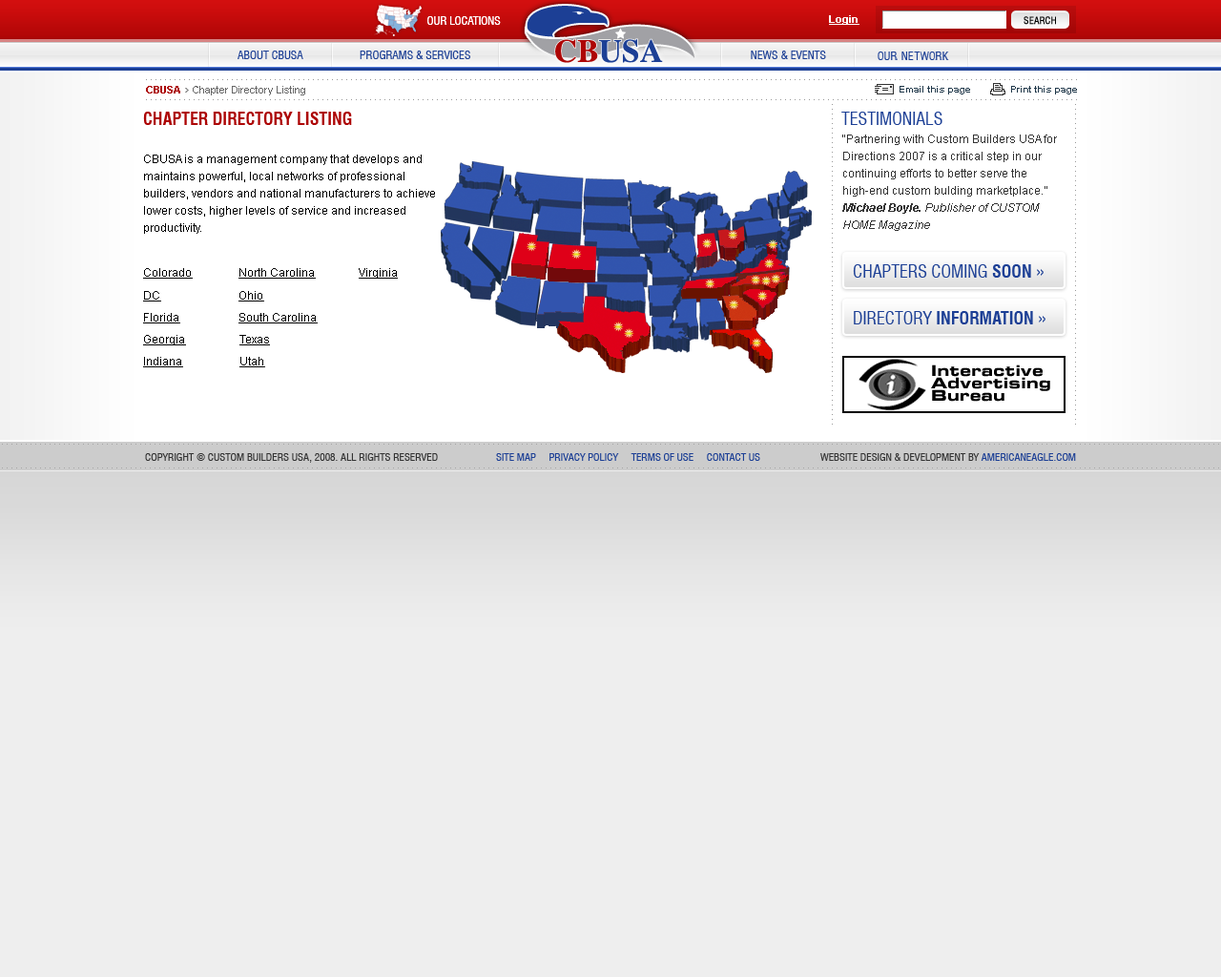
<style>
.page{position:relative;width:1221px;height:977px;background:#eeeeee}
.page>*{position:absolute;margin:0}
.t1{font:11.4px "Swiss721BT-RomanCondensed";letter-spacing:-0.002em;color:#ffffff;text-transform:uppercase}
.t2{font:10.5px "Arial-BoldMT";color:#fffffe;text-decoration:underline}
.t3{font:9.5px "Swiss721BT-RomanCondensed";color:#000000;text-transform:uppercase;font-weight:bold}
.t4{font:10.5px "ArialMT";color:#666666}
.t5{font:10.5px "Arial-BoldMT";color:#ad0505}
.t6{font:9.5px "Arial-BoldMT";color:#1f3749}
.t7{font:17.2px "Swiss721BT-BoldCondensed";color:#ad0505;text-transform:uppercase}
.t8{font:17.2px "Swiss721BT-RomanCondensed";color:#1c3f95;text-transform:uppercase}
.t9{font:11.4px/17.2px "ArialMT";color:#333333}
.t10{font:11.4px/17.2px "Arial-BoldItalicMT";color:#333333}
.t11{font:11.4px/17.2px "Arial-ItalicMT";color:#333333}
.t12{font:10.5px/17.2px "ArialMT";color:#ad0505;text-decoration:underline}
.t13{font:11.4px/17.2px "ArialMT";color:#000000}
.t14{font:11.4px "ArialMT";color:#000000;text-decoration:underline}
.t15{font:17.2px "Swiss721BT-BoldCondensed";color:#1c3f95;text-transform:uppercase}
.t16{font:10.5px "Swiss721BT-RomanCondensed";color:#333333;text-transform:uppercase}
.t17{font:10.5px "Swiss721BT-RomanCondensed";color:#1c3f95;text-transform:uppercase}
</style>
<div class="page">
<p class="t1" style="left:427px;top:16px;width:74px;height:9px;opacity:0.75">Our Locations</p>
<p class="t1" style="left:427px;top:16px;width:74px;height:9px">Our Locations</p>
<p class="t2" style="left:829px;top:15px;width:30px;height:10px">Login</p>
<p class="t3" style="left:1023px;top:16px;width:33px;height:9px">Search</p>
<p class="t4" style="left:146px;top:86px;width:159px;height:9px"><span class="t5">CBUSA</span>    Chapter Directory Listing</p>
<p class="t6" style="left:899px;top:86px;width:71px;height:8px">Email this page</p>
<p class="t6" style="left:1011px;top:86px;width:66px;height:8px">Print this page</p>
<p class="t7" style="left:143px;top:112px;width:209px;height:13px">chapter directory listing</p>
<p class="t8" style="left:841px;top:112px;width:101px;height:13px">Testimonials</p>
<p class="t9" style="left:842px;top:134px;width:215px;height:97px">“Partnering with Custom Builders USA for Directions 2007 is a critical step in our continuing efforts to better serve the high-end custom bulding marketplace.”<br><span class="t10">Michael Boyle.</span><span class="t11"> Publisher of CUSTOM HOME Magazine<br></span><span class="t12">More Testimonials</span></p>
<p class="t13" style="left:144px;top:155px;width:291px;height:79px">CBUSA is a management company that develops and maintains powerful, local networks of professional builders, vendors and national manufacturers to achieve lower costs, higher levels of service and increased productivity.</p>
<p class="t14" style="left:143px;top:268px;width:50px;height:11px">Colorado</p>
<p class="t14" style="left:238px;top:268px;width:78px;height:11px">North Carolina</p>
<p class="t14" style="left:359px;top:268px;width:39px;height:11px">Virginia</p>
<p class="t8" style="left:853px;top:264px;width:190px;height:14px">CHAPTERS COMING <span class="t15">SOON </span>»</p>
<p class="t14" style="left:143px;top:291px;width:18px;height:10px">DC</p>
<p class="t14" style="left:238px;top:291px;width:26px;height:10px">Ohio</p>
<p class="t14" style="left:143px;top:313px;width:37px;height:10px">Florida</p>
<p class="t14" style="left:238px;top:313px;width:80px;height:10px">South Carolina</p>
<p class="t15" style="left:854px;top:311px;width:191px;height:13px"><span class="t8">DIRECTORY </span>INFORMATION<span class="t8"> »</span></p>
<p class="t14" style="left:143px;top:335px;width:43px;height:10px">Georgia</p>
<p class="t14" style="left:239px;top:335px;width:31px;height:10px">Texas</p>
<p class="t14" style="left:143px;top:357px;width:40px;height:10px">Indiana</p>
<p class="t14" style="left:239px;top:357px;width:26px;height:10px">Utah</p>
<p class="t16" style="left:145px;top:453px;width:293px;height:10px">Copyright © Custom Builders USA, 2008. All Rights Reserved</p>
<p class="t17" style="left:496px;top:453px;width:264px;height:8px">Site map     Privacy Policy     Terms of Use     Contact Us</p>
<p class="t16" style="left:820px;top:453px;width:256px;height:8px">Website Design &amp; Development by <span class="t17">Americaneagle.com</span></p>
</div>
